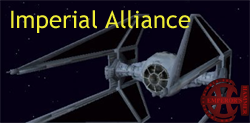
<style>
.page{position:relative;width:250px;height:123px;background:#050014}
.page>*{position:absolute;margin:0}
.t1{font:24px "TrebuchetMS";color:#f0ee35}
</style>
<div class="page">
<p class="t1" style="left:11px;top:10px;width:180px;height:23px">Imperial Alliance</p>
</div>
